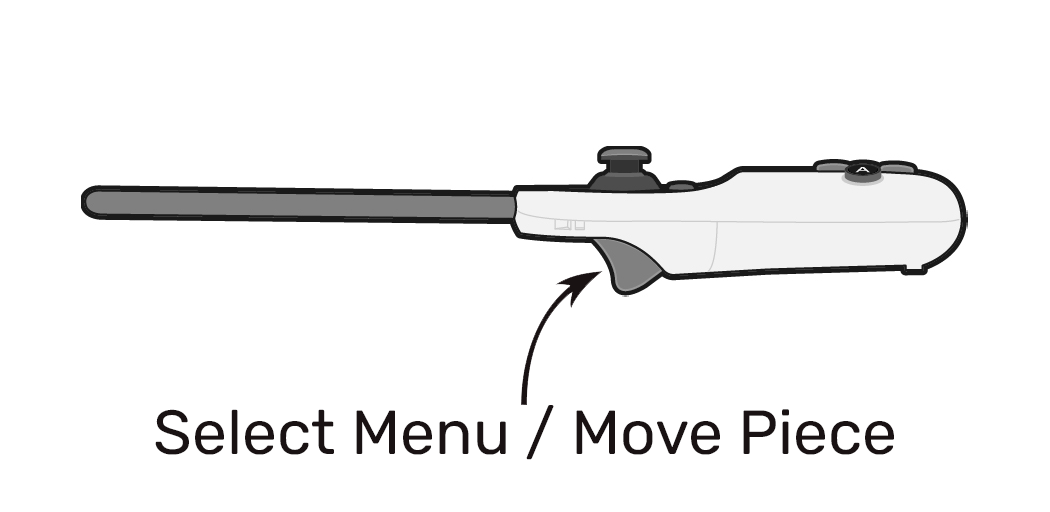
<style>
.page{position:relative;width:1050px;height:512px;background:#ffffff}
.page>*{position:absolute;margin:0}
.t1{font:62.3px "Rubik-Regular";color:#191213}
</style>
<div class="page">
<p class="t1" style="left:155px;top:405px;width:739px;height:55px">Select Menu / Move Piece</p>
</div>
